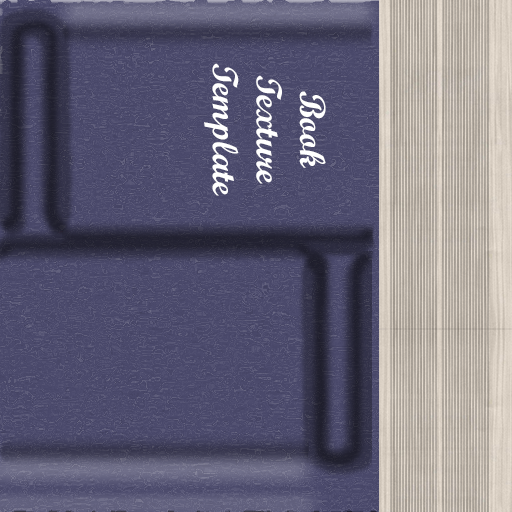
<style>
.page{position:relative;width:512px;height:512px}
.page>*{position:absolute;margin:0}
.t1{font:36.3px "ScriptMTBold";color:#ffffff}
</style>
<div class="page">
<p class="t1" style="left:204px;top:63px;width:122px;height:133px;text-align:center;rotate:90deg">Book<br>Texture<br>Template</p>
</div>
